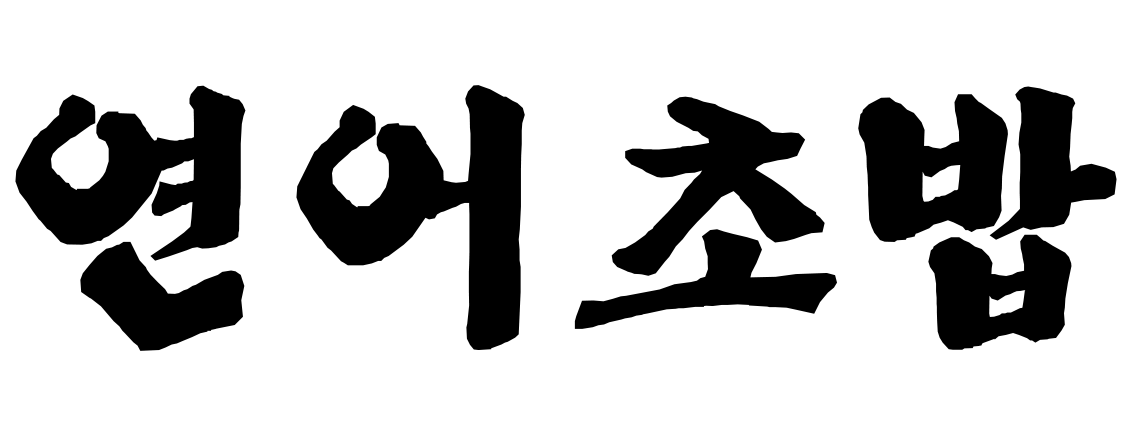
<style>
.page{position:relative;width:1128px;height:448px;background:#ffffff}
.page>*{position:absolute;margin:0}
.t1{font:275px "Yj-BACDOO-Bold";color:#000000}
</style>
<div class="page">
<p class="t1" style="left:15px;top:85px;width:1102px;height:266px">연어초밥</p>
</div>
